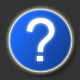
<style>
.page{position:relative;width:80px;height:80px;background:#333333}
.page>*{position:absolute;margin:0}
.t1{font:60px "ArialMT";letter-spacing:-0.08em;color:#ffffff}
</style>
<div class="page">
<p class="t1" style="left:26px;top:18px;width:29px;height:43px">?</p>
</div>
